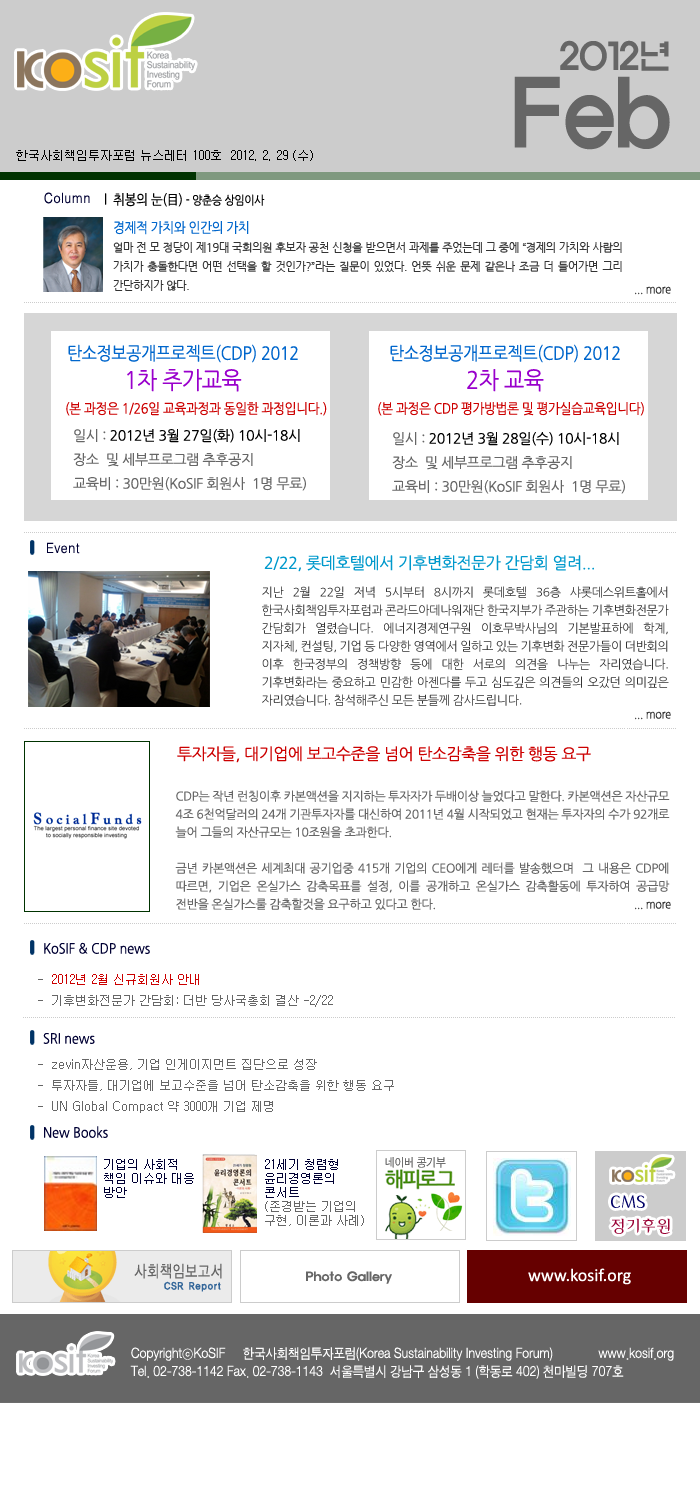
<style>
.page{position:relative;width:700px;height:1500px;background:#ffffff}
.page>*{position:absolute;margin:0}
.t1{font:36.1px/41.9px "ExpoM-HM";color:#666666;scale:0.89 1}
.t2{font:90.2px/41.9px "ExpoM-HM";color:#666666;scale:0.89 1}
.t3{font:12px "Gulim";color:#000000}
.t4{font:14px "H2gtrM";color:#000033;scale:0.9 1}
.t5{font:14px "NanumGothic";letter-spacing:-0.025em;color:#000000;scale:0.9 1}
.t6{font:12px "NanumGothic";letter-spacing:-0.025em;color:#000000;scale:0.9 1}
.t7{font:14px "NanumGothic";letter-spacing:-0.025em;color:#0066cc;scale:0.9 1}
.t8{font:11px "NanumGothic";letter-spacing:-0.025em;color:#333333}
.t9{font:12px "NanumGothic";letter-spacing:-0.025em;color:#333333;scale:0.9 1}
.t10{font:18px/24px "NanumGothic";letter-spacing:-0.025em;color:#0066cc;scale:0.9 1}
.t11{font:24px/24px "NanumGothic";letter-spacing:-0.025em;color:#9900cc;scale:0.9 1}
.t12{font:14px "NanumGothic";letter-spacing:-0.025em;color:#cc0000;scale:0.9 1}
.t13{font:14px/24px "NanumGothic";letter-spacing:-0.025em;color:#666666}
.t14{font:14px/24px "NanumGothic";letter-spacing:-0.025em;color:#000000}
.t15{font:16px "NanumGothic";letter-spacing:-0.025em;color:#0099cc}
.t16{font:12px/18px "NanumGothic";letter-spacing:-0.025em;color:#333333}
.t17{font:16px "NanumGothic";letter-spacing:-0.025em;color:#cc0000}
.t18{font:12px/18px "NanumGothic";letter-spacing:-0.025em;color:#666666}
.t19{font:14px "NanumGothic";color:#000033;scale:0.9 1}
.t20{font:12px "Gulim";color:#666666}
.t21{font:12px "Gulim";color:#cc0000}
.t22{font:12px/14px "Gulim";color:#000033}
.t23{font:12px/14px "Gulim";color:#666666}
</style>
<div class="page">
<p class="t1" style="left:514px;top:40px;width:156px;height:110px;text-align:right">2012년<br><span class="t2">Feb</span></p>
<p class="t3" style="left:16px;top:150px;width:297px;height:11px">한국사회책임투자포럼 뉴스레터 100호  2012. 2. 29 (수)</p>
<p class="t4" style="left:44px;top:192px;width:46px;height:12px">Column</p>
<p class="t5" style="left:105px;top:193px;width:160px;height:14px">l  취봉의 눈(目) <span class="t6">- 양춘승 상임이사</span></p>
<p class="t7" style="left:114px;top:221px;width:135px;height:14px">경제적 가치와 인간의 가치</p>
<p class="t8" style="left:113px;top:242px;width:509px;height:49px;text-align:justify">얼마 전 모 정당이 제19대 국회의원 후보자 공천 신청을 받으면서 과제를 주었는데 그 중에 “경제의 가치와 사람의 가치가 충돌한다면 어떤 선택을 할 것인가?”라는 질문이 있었다. 언뜻 쉬운 문제 같은나 조금 더 들어가면 그리 간단하지가 않다.</p>
<p class="t9" style="left:635px;top:286px;width:36px;height:9px">... more</p>
<p class="t10" style="left:68px;top:344px;width:230px;height:48px;text-align:center">탄소정보공개프로젝트(CDP) 2012<br><span class="t11">1차 추가교육</span></p>
<p class="t10" style="left:390px;top:344px;width:230px;height:48px;text-align:center">탄소정보공개프로젝트(CDP) 2012<br><span class="t11">2차 교육</span></p>
<p class="t12" style="left:66px;top:402px;width:261px;height:14px">(본 과정은 1/26일 교육과정과 동일한 과정입니다.)</p>
<p class="t12" style="left:378px;top:402px;width:266px;height:14px">(본 과정은 CDP 평가방법론 및 평가실습교육입니다)</p>
<p class="t13" style="left:73px;top:429px;width:233px;height:62px">일시 : <span class="t14">2012년 3월 27일(화) 10시-18시<br></span>장소  및 세부프로그램 추후공지<br>교육비 : 30만원(KoSIF 회원사  1명 무료)</p>
<p class="t13" style="left:392px;top:432px;width:233px;height:62px">일시 : <span class="t14">2012년 3월 28일(수) 10시-18시<br></span>장소  및 세부프로그램 추후공지<br>교육비 : 30만원(KoSIF 회원사  1명 무료)</p>
<p class="t4" style="left:47px;top:542px;width:33px;height:12px">Event</p>
<p class="t15" style="left:264px;top:555px;width:330px;height:17px">2/22, 롯데호텔에서 기후변화전문가 간담회 열려...</p>
<p class="t16" style="left:262px;top:586px;width:407px;height:120px;text-align:justify">지난 2월 22일 저녁 5시부터 8시까지 롯데호텔 36층 샤롯데스위트홀에서 한국사회책임투자포럼과 콘라드아데나워재단 한국지부가 주관하는 기후변화전문가 간담회가 열렸습니다. 에너지경제연구원 이호무박사님의 기본발표하에 학계, 지자체, 컨설팅, 기업 등 다양한 영역에서 일하고 있는 기후변화 전문가들이 더반회의 이후 한국정부의 정책방향 등에 대한 서로의 의견을 나누는 자리였습니다. 기후변화라는 중요하고 민감한 아젠다를 두고 심도깊은 의견들의 오갔던 의미깊은 자리였습니다. 참석해주신 모든 분들께 감사드립니다.</p>
<p class="t9" style="left:635px;top:711px;width:36px;height:9px">... more</p>
<p class="t17" style="left:177px;top:746px;width:414px;height:17px">투자자들, 대기업에 보고수준을 넘어 탄소감축을 위한 행동 요구</p>
<p class="t18" style="left:175px;top:790px;width:495px;height:120px;text-align:justify">CDP는 작년 런칭이후 카본액션을 지지하는 투자자가 두배이상 늘었다고 말한다. 카본액션은 자산규모 4조 6천억달러의 24개 기관투자자를 대신하여 2011년 4월 시작되었고 현재는 투자자의 수가 92개로 늘어 그들의 자산규모는 10조원을 초과한다.  <br><br>금년 카본액션은 세계최대 공기업중 415개 기업의 CEO에게 레터를 발송했으며  그 내용은 CDP에 따르면, 기업은 온실가스 감축목표를 설정, 이를 공개하고 온실가스 감축활동에 투자하여 공급망 전반을 온실가스룰 감축할것을 요구하고 있다고 한다.</p>
<p class="t9" style="left:635px;top:901px;width:36px;height:9px">... more</p>
<p class="t19" style="left:44px;top:942px;width:106px;height:12px">KoSIF &amp; CDP news</p>
<p class="t20" style="left:38px;top:974px;width:295px;height:33px">-  <span class="t21">2012년 2월 신규회원사 안내     <br></span>-  기후변화전문가 간담회: 더반 당사국총회 결산 -2/22</p>
<p class="t19" style="left:43px;top:1033px;width:52px;height:11px">SRI news</p>
<p class="t20" style="left:38px;top:1059px;width:356px;height:54px">-  zevin자산운용, 기업 인게이지먼트 집단으로 성장 <br>-  투자자들, 대기업에 보고수준을 넘어 탄소감축을 위한 행동 요구<br>-  UN Global Compact 약 3000개 기업 제명</p>
<p class="t19" style="left:44px;top:1126px;width:64px;height:12px">New Books</p>
<p class="t22" style="left:104px;top:1159px;width:90px;height:39px">기업의 사회적 책임 이슈와 대응 방안</p>
<p class="t23" style="left:265px;top:1159px;width:99px;height:67px"><span class="t22">21세기 청렴형 윤리경영론의 콘서트<br></span>(존경받는 기업의 구현, 이론과 사례)</p>
</div>
